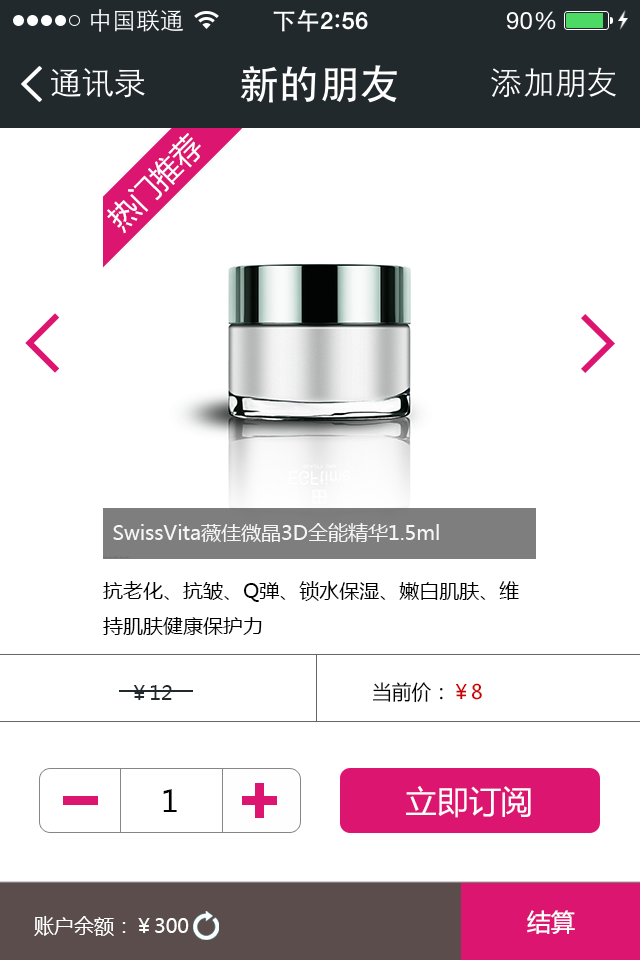
<style>
.page{position:relative;width:640px;height:960px;background:#ffffff}
.page>*{position:absolute;margin:0}
.t1{font:20px "MicrosoftYaHei";color:#f7f6f6}
.t2{font:20px "MicrosoftYaHei";color:#000000}
.t3{font:20px "MicrosoftYaHei";color:#22292c}
.t4{font:20px "MicrosoftYaHei";color:#ce0000}
.t5{font:30px "MicrosoftYaHei";color:#000000}
.t6{font:32.4px "MicrosoftYaHei";color:#ffffff}
.t7{font:20px "MicrosoftYaHei";color:#ffffff}
.t8{font:20px "MicrosoftYaHei";color:#fffefe}
.t9{font:24px "MicrosoftYaHei";color:#ffffff}
</style>
<div class="page">
<p class="t1" style="left:113px;top:523px;width:326px;height:19px">SwissVita薇佳微晶3D全能精华1.5ml</p>
<p class="t2" style="left:103px;top:581px;width:416px;height:54px">抗老化、抗皱、Q弹、锁水保湿、嫩白肌肤、维<br>持肌肤健康保护力</p>
<p class="t3" style="left:133px;top:685px;width:39px;height:15px">￥12</p>
<p class="t2" style="left:373px;top:682px;width:109px;height:21px">当前价：<span class="t4">￥8</span></p>
<p class="t5" style="left:163px;top:789px;width:14px;height:23px">1</p>
<p class="t6" style="left:406px;top:786px;width:125px;height:32px">立即订阅</p>
<p class="t7" style="left:34px;top:916px;width:155px;height:20px">账户余额：<span class="t8">￥</span>300</p>
<p class="t9" style="left:527px;top:910px;width:48px;height:24px">结算</p>
</div>
